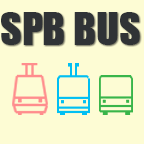
<style>
.page{position:relative;width:144px;height:144px;background:#fdfcd4}
.page>*{position:absolute;margin:0}
.t1{font:41.7px "Impact";color:#303336}
</style>
<div class="page">
<p class="t1" style="left:1px;top:12px;width:139px;height:33px">SPB BUS</p>
</div>
